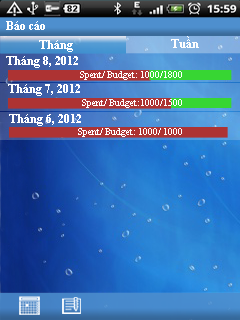
<style>
.page{position:relative;width:240px;height:320px}
.page>*{position:absolute;margin:0}
.t1{font:11.6px "TimesNewRomanPS-BoldMT";color:#ffffff}
.t2{font:11.5px "TimesNewRomanPS-BoldMT";color:#ffffff}
.t3{font:9.3px "TimesNewRomanPSMT";color:#ffffff}
</style>
<div class="page">
<p class="t1" style="left:6px;top:21px;width:39px;height:9px">Báo cáo</p>
<p class="t1" style="left:39px;top:40px;width:34px;height:12px">Tháng</p>
<p class="t1" style="left:171px;top:36px;width:28px;height:12px">Tuần</p>
<p class="t2" style="left:6px;top:56px;width:72px;height:12px">Tháng 8, 2012</p>
<p class="t3" style="left:80px;top:71px;width:102px;height:9px">Spent/ Budget: 1000/1800</p>
<p class="t2" style="left:8px;top:84px;width:72px;height:12px">Tháng 7, 2012</p>
<p class="t3" style="left:82px;top:99px;width:100px;height:9px">Spent/ Budget:1000/1500</p>
<p class="t2" style="left:9px;top:114px;width:72px;height:12px">Tháng 6, 2012</p>
<p class="t3" style="left:78px;top:128px;width:104px;height:9px">Spent/ Budget: 1000/ 1000</p>
</div>
